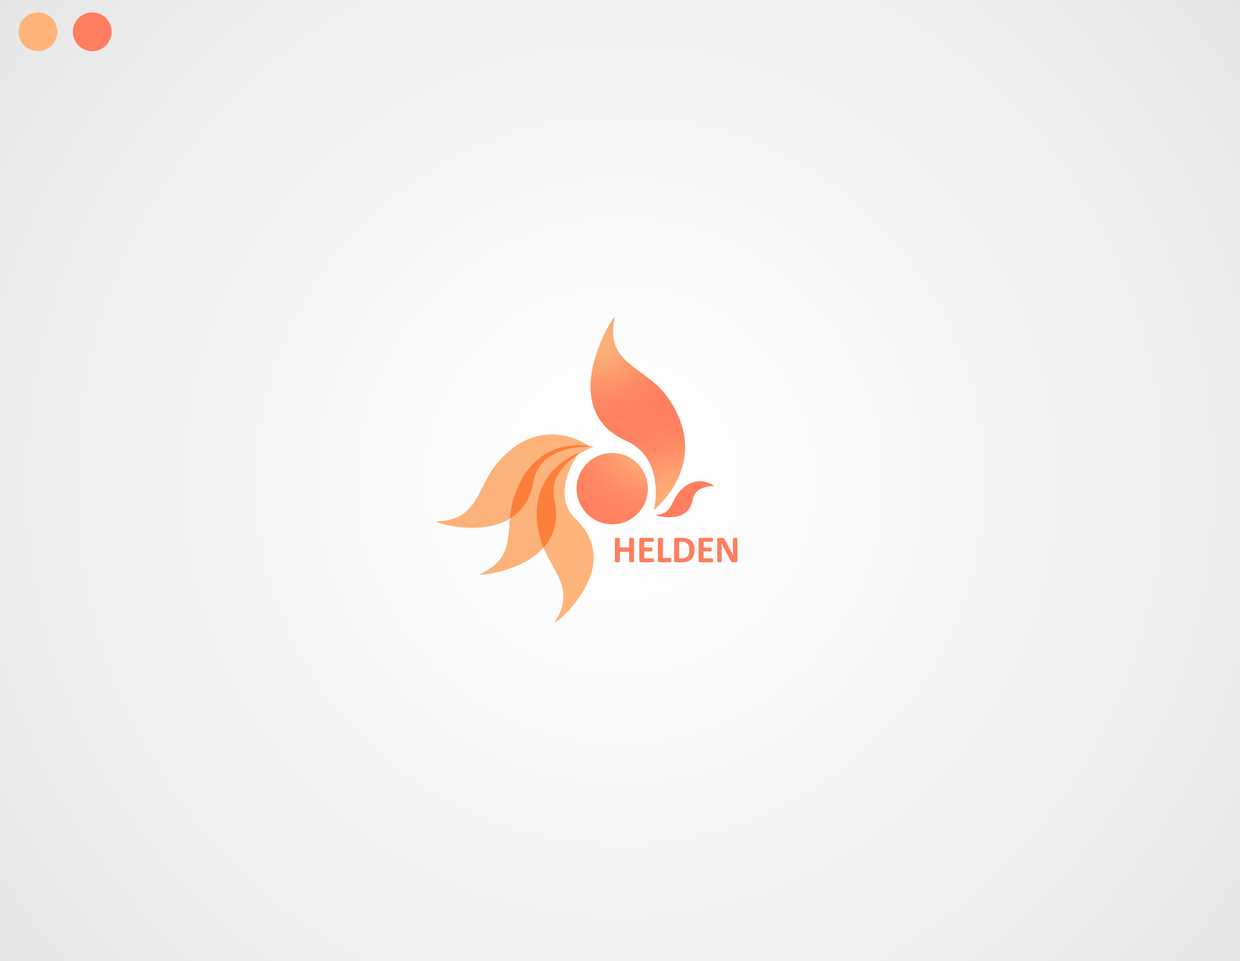
<style>
.page{position:relative;width:1240px;height:961px}
.page>*{position:absolute;margin:0}
.t1{font:38.8px "Calibri-Bold";letter-spacing:-0.004em;color:#ff7e5f}
</style>
<div class="page">
<p class="t1" style="left:615px;top:538px;width:123px;height:24px">HELDEN</p>
</div>
